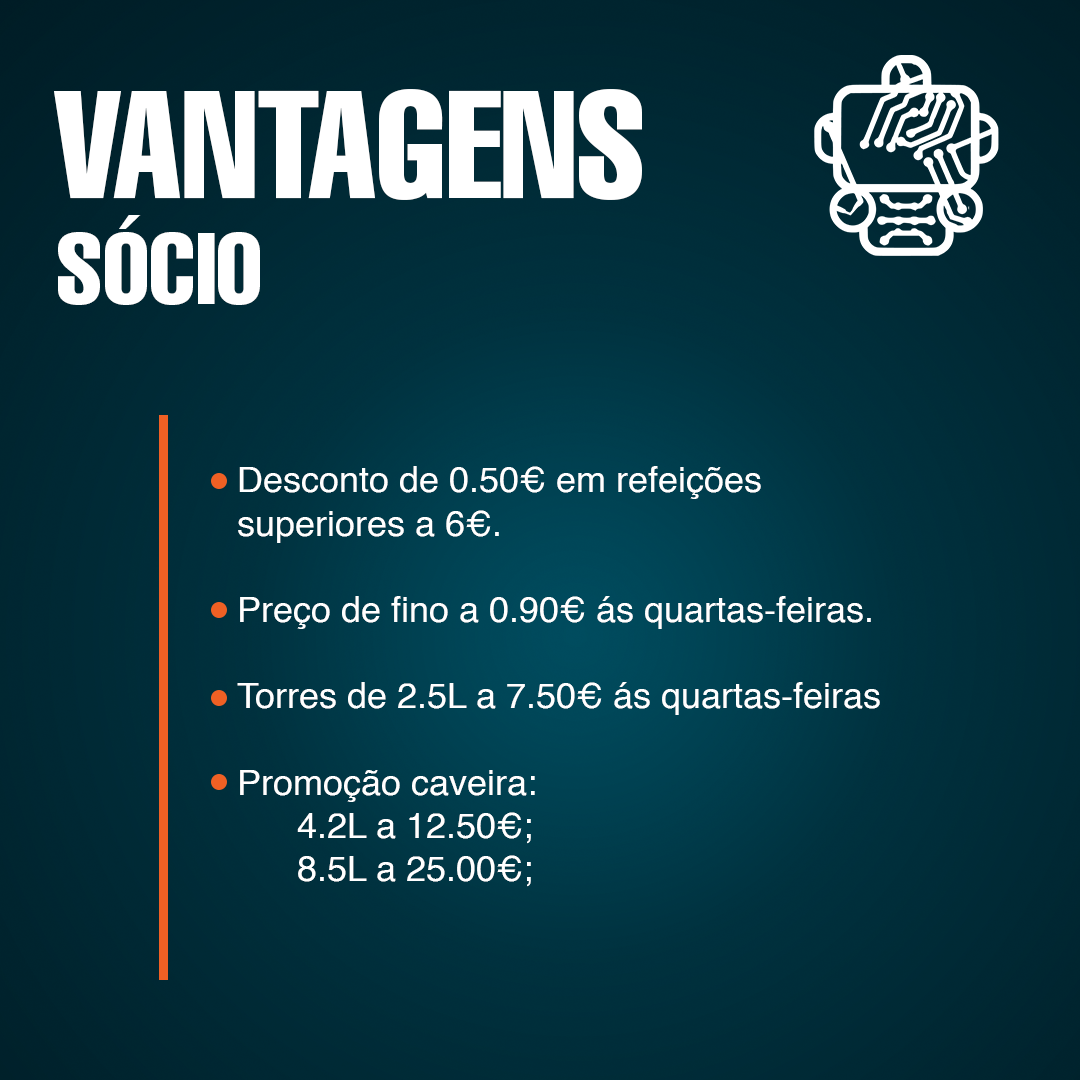
<style>
.page{position:relative;width:1080px;height:1080px}
.page>*{position:absolute;margin:0}
.t1{font:150px "Helvetica-Compressed";color:#ffffff}
.t2{font:100px "Helvetica-Compressed";color:#ffffff}
.t3{font:36px "Helvetica";color:#ffffff}
</style>
<div class="page">
<p class="t1" style="left:54px;top:89px;width:588px;height:111px">VANTAGENS</p>
<p class="t2" style="left:58px;top:215px;width:202px;height:90px">SÓCIO</p>
<p class="t3" style="left:237px;top:466px;width:643px;height:421px">Desconto de 0.50€ em refeições superiores a 6€.<br><br>Preço de fino a 0.90€ ás quartas-feiras.<br><br>Torres de 2.5L a 7.50€ ás quartas-feiras<br><br>Promoção caveira: <br>      4.2L a 12.50€;<br>      8.5L a 25.00€;</p>
</div>
